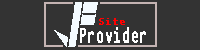
<style>
.page{position:relative;width:200px;height:50px;background:#333333}
.page>*{position:absolute;margin:0}
.t1{font:22.7px "Inconsolata";letter-spacing:0.09em;color:#ffffff;font-weight:bold;scale:0.62 1}
</style>
<div class="page">
<p class="t1" style="left:80px;top:27px;width:66px;height:16px">Provider</p>
</div>
